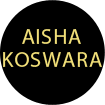
<style>
.page{position:relative;width:105px;height:105px;background:#000000}
.page>*{position:absolute;margin:0}
.t1{font:22px "MyriadPro-Regular";letter-spacing:0.04em;color:#f0de78}
</style>
<div class="page">
<p class="t1" style="left:22px;top:29px;width:59px;height:15px">AISHA</p>
<p class="t1" style="left:3px;top:52px;width:99px;height:15px">KOSWARA</p>
</div>
